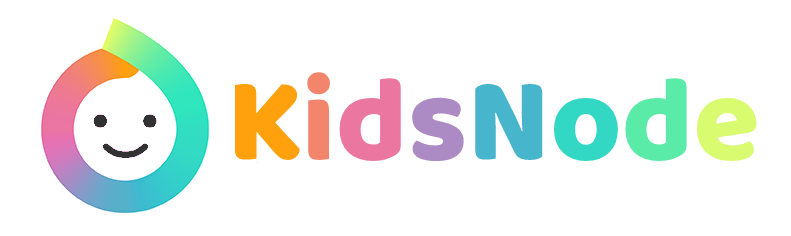
<style>
.page{position:relative;width:791px;height:236px;background:#ffffff}
.page>*{position:absolute;margin:0}
.t1{font:122px "Baloo";color:#ffa10c}
.t2{font:122px "Baloo";color:#f2856b}
.t3{font:122px "Baloo";color:#eb76a0}
.t4{font:122px "Baloo";color:#ac8ac4}
.t5{font:122px "Baloo";color:#47b6cd}
.t6{font:122px "Baloo";color:#32d8c4}
.t7{font:122px "Baloo";color:#5aeba9}
.t8{font:122px "Baloo";color:#d8fb6f}
</style>
<div class="page">
<p class="t1" style="left:234px;top:72px;width:523px;height:90px">K<span class="t2">i</span><span class="t3">d</span><span class="t4">s</span><span class="t5">N</span><span class="t6">o</span><span class="t7">d</span><span class="t8">e</span></p>
</div>
